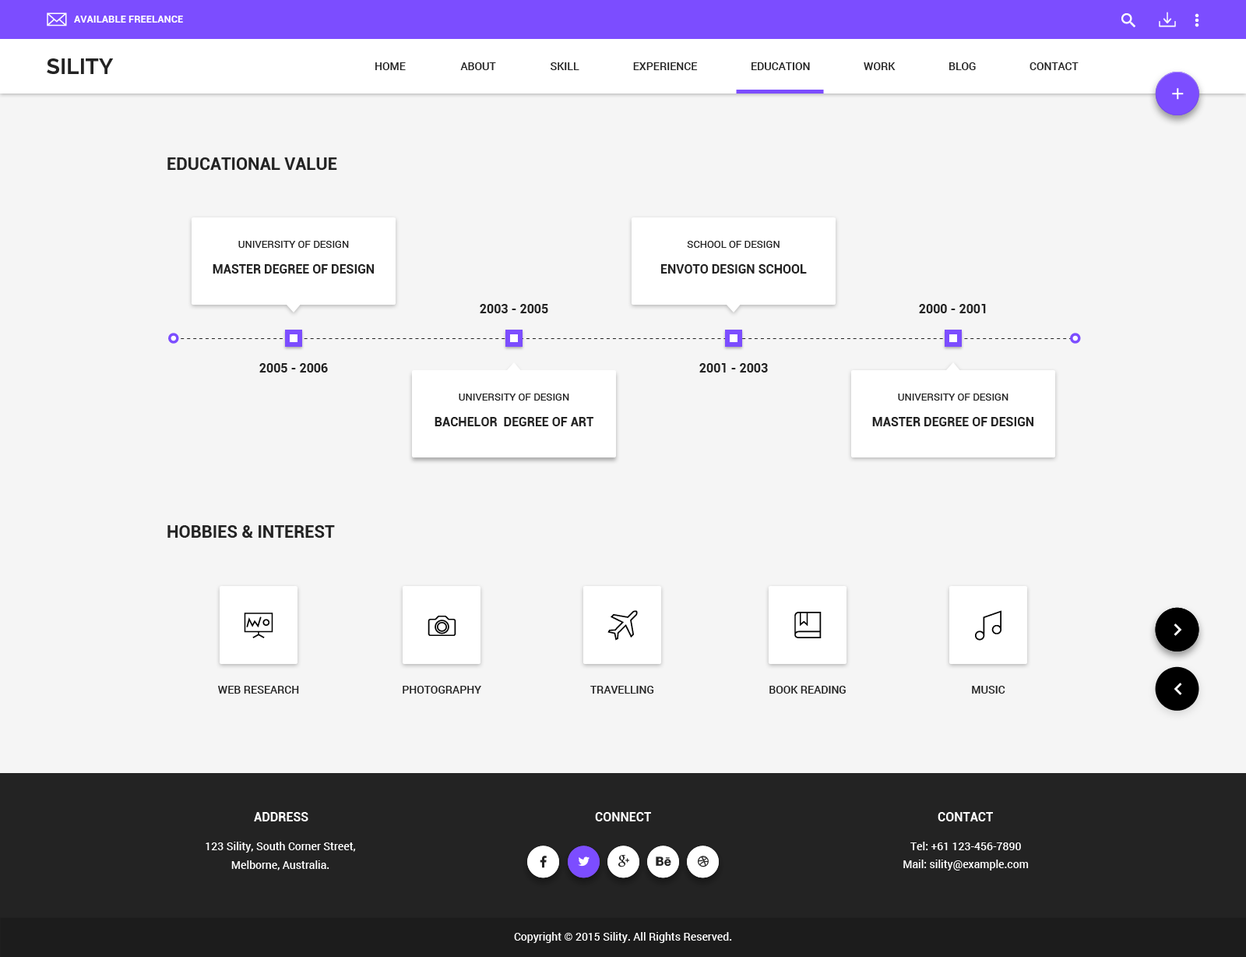
<style>
.page{position:relative;width:1246px;height:957px;background:#f5f5f5}
.page>*{position:absolute;margin:0}
.t1{font:10.1px "Roboto-Bold";color:#ffffff;text-transform:uppercase}
.t2{font:21.8px "Raleway-Bold";color:#232323}
.t3{font:10.9px "Roboto-Medium";color:#232323;text-transform:uppercase}
.t4{font:17.1px "Roboto-Bold";color:#232323}
.t5{font:10.1px "Roboto-Regular";color:#232323;text-transform:uppercase}
.t6{font:12.5px "Roboto-Bold";color:#232323;text-transform:uppercase}
.t7{font:11.7px "Roboto-Medium";letter-spacing:0.2em;color:#232323}
.t8{font:10.9px "Roboto-Medium";color:#232323}
.t9{font:12.5px "Roboto-Bold";color:#ffffff;text-transform:uppercase}
.t10{font:10.9px/18.7px "Roboto-Medium";color:#ffffff}
.t11{font:10.9px "Roboto-Medium";color:#ffffff}
</style>
<div class="page">
<p class="t1" style="left:74px;top:16px;width:109px;height:7px">available freelance</p>
<p class="t2" style="left:47px;top:58px;width:67px;height:16px">SILITY</p>
<p class="t3" style="left:375px;top:62px;width:31px;height:8px">home</p>
<p class="t3" style="left:460px;top:62px;width:36px;height:8px">about</p>
<p class="t3" style="left:551px;top:62px;width:29px;height:8px">skill</p>
<p class="t3" style="left:633px;top:62px;width:65px;height:8px">experience</p>
<p class="t3" style="left:752px;top:62px;width:58px;height:8px">education</p>
<p class="t3" style="left:864px;top:62px;width:32px;height:8px">work</p>
<p class="t3" style="left:950px;top:62px;width:26px;height:8px">blog</p>
<p class="t3" style="left:1030px;top:62px;width:49px;height:8px">Contact</p>
<p class="t4" style="left:167px;top:157px;width:170px;height:13px">EDUCATIONAL VALUE</p>
<p class="t5" style="left:238px;top:241px;width:111px;height:7px">University of Design</p>
<p class="t5" style="left:687px;top:241px;width:93px;height:7px">School of Design</p>
<p class="t6" style="left:213px;top:264px;width:161px;height:9px">master degree of design</p>
<p class="t6" style="left:661px;top:264px;width:146px;height:9px">envoto design school</p>
<p class="t6" style="left:480px;top:304px;width:68px;height:9px">2003 - 2005</p>
<p class="t6" style="left:919px;top:304px;width:67px;height:9px">2000 - 2001</p>
<p class="t7" style="left:168px;top:338px;width:911px;height:1px">----------------------------------------------------------------------------------------------------------------------------------------------------</p>
<p class="t6" style="left:259px;top:363px;width:69px;height:9px">2005 - 2006</p>
<p class="t6" style="left:700px;top:363px;width:68px;height:9px">2001 - 2003</p>
<p class="t5" style="left:459px;top:393px;width:110px;height:7px">University of Design</p>
<p class="t5" style="left:898px;top:393px;width:111px;height:7px">University of Design</p>
<p class="t6" style="left:435px;top:417px;width:159px;height:9px">Bachelor  degree of art</p>
<p class="t6" style="left:873px;top:417px;width:161px;height:9px">master degree of design</p>
<p class="t4" style="left:167px;top:525px;width:168px;height:13px">HOBBIES &amp; INTEREST</p>
<p class="t8" style="left:218px;top:686px;width:81px;height:7px">WEB RESEARCH</p>
<p class="t8" style="left:403px;top:686px;width:78px;height:7px">PHOTOGRAPHY</p>
<p class="t8" style="left:591px;top:686px;width:63px;height:7px">TRAVELLING</p>
<p class="t8" style="left:770px;top:686px;width:76px;height:7px">BOOK READING</p>
<p class="t8" style="left:972px;top:686px;width:34px;height:7px">MUSIC</p>
<p class="t9" style="left:254px;top:812px;width:54px;height:9px">Address</p>
<p class="t9" style="left:595px;top:812px;width:56px;height:9px">connect</p>
<p class="t9" style="left:938px;top:812px;width:55px;height:9px">contact</p>
<p class="t10" style="left:206px;top:841px;width:150px;height:29px;text-align:center">123 Sility, South Corner Street,<br>Melborne, Australia.</p>
<p class="t11" style="left:911px;top:841px;width:110px;height:9px">Tel: +61 123-456-7890</p>
<p class="t11" style="left:904px;top:859px;width:125px;height:11px">Mail: sility@example.com</p>
<p class="t11" style="left:514px;top:932px;width:218px;height:11px">Copyright © 2015 Sility. All Rights Reserved.</p>
</div>
